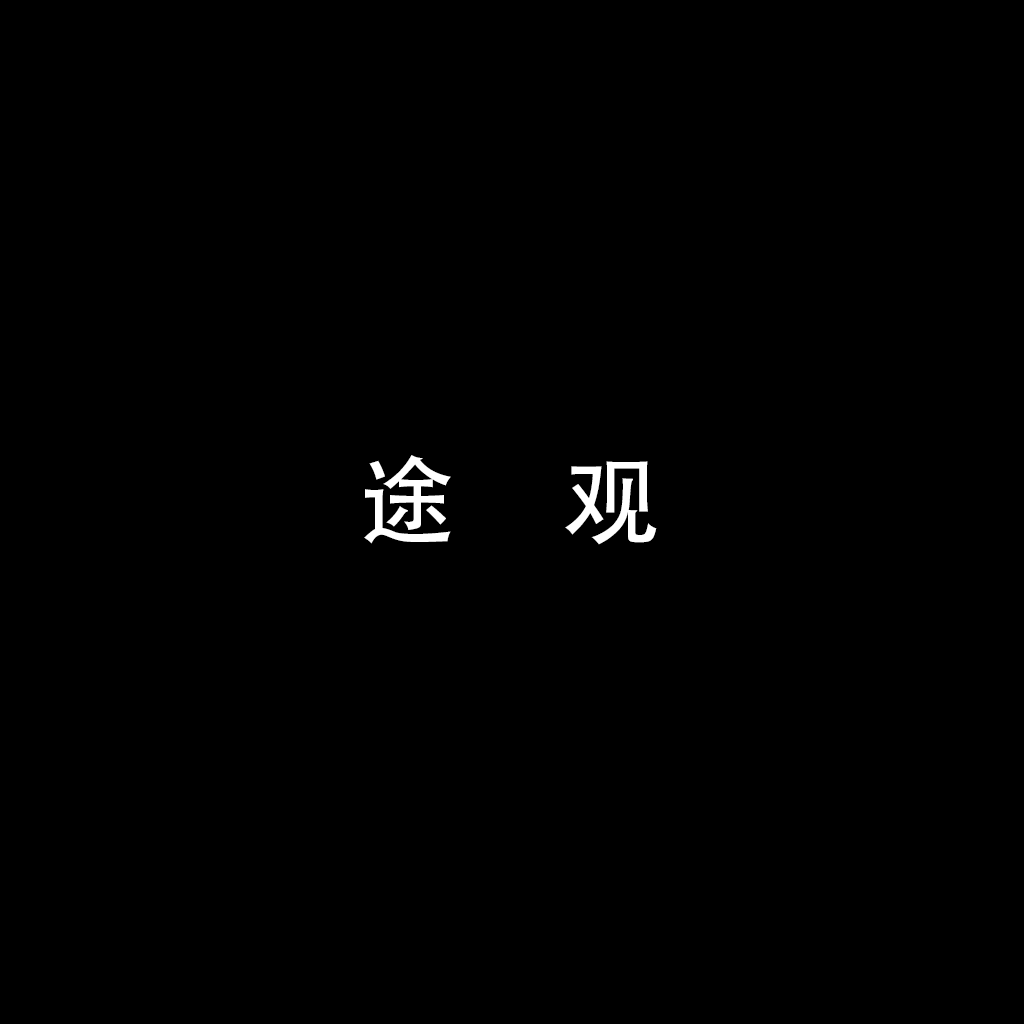
<style>
.page{position:relative;width:1024px;height:1024px;background:#000000}
.page>*{position:absolute;margin:0}
.t1{font:96.2px "AdobeHeitiStd-Regular";color:#ffffff}
</style>
<div class="page">
<p class="t1" style="left:364px;top:455px;width:293px;height:90px">途     观</p>
</div>
